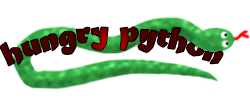
<style>
.page{position:relative;width:250px;height:100px;background:#ffffff}
.page>*{position:absolute;margin:0}
.t1{font:33.2px "MaturaMTScriptCapitals";color:#460000}
</style>
<div class="page">
<p class="t1" style="left:0px;top:27px;width:223px;height:39px">hungry python</p>
</div>
